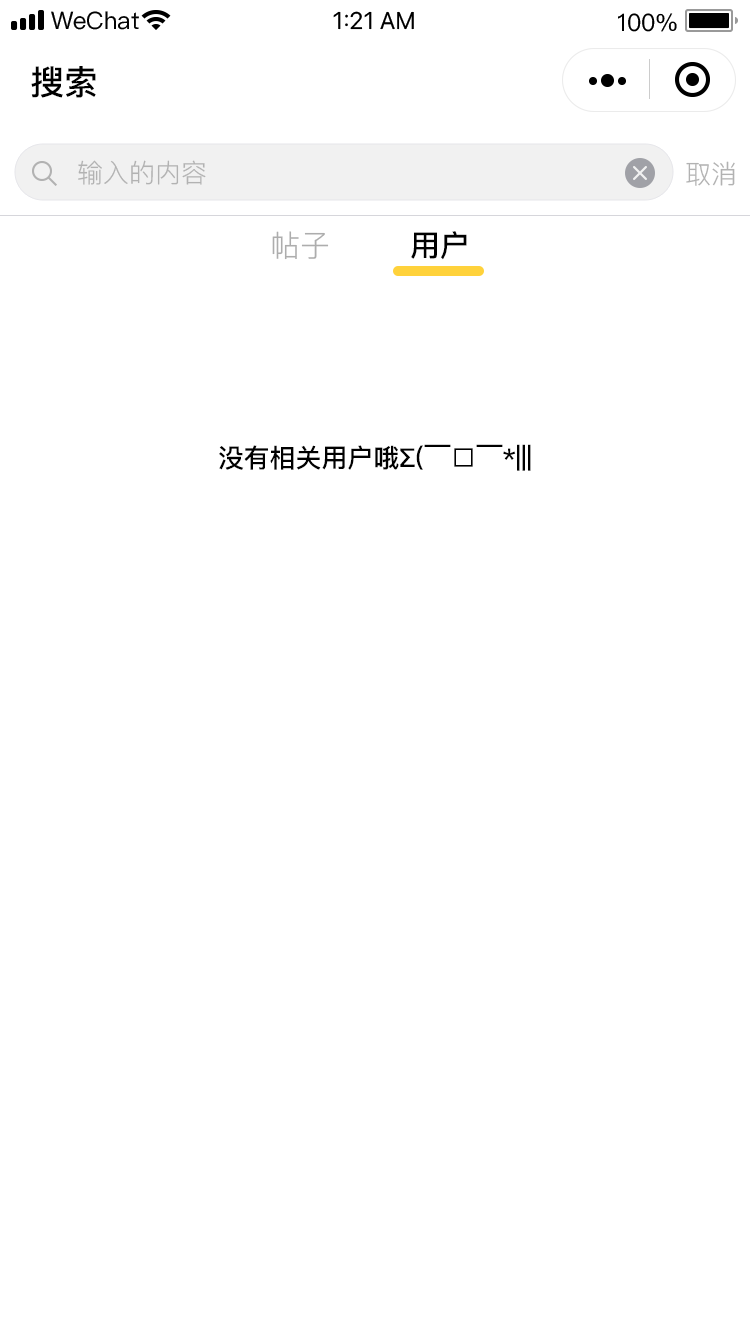
<style>
.page{position:relative;width:750px;height:1334px;background:#ffffff}
.page>*{position:absolute;margin:0}
.t1{font:34px "PingFang-SC-Bold";color:#000000}
.t2{font:26px "PingFangSC-Regular";color:#b2b2b2}
.t3{font:30px "PingFang-SC-Regular";color:#adadad}
.t4{font:30px "PingFang-SC-Bold";color:#000000}
.t5{font:26px "PingFang-SC-Bold";color:#000000}
</style>
<div class="page">
<p class="t1" style="left:31px;top:66px;width:65px;height:32px">搜索</p>
<p class="t2" style="left:78px;top:160px;width:128px;height:25px">输入的内容</p>
<p class="t2" style="left:686px;top:161px;width:49px;height:25px">取消</p>
<p class="t3" style="left:272px;top:231px;width:57px;height:29px">帖子</p>
<p class="t4" style="left:411px;top:231px;width:56px;height:29px">用户</p>
<p class="t5" style="left:219px;top:444px;width:312px;height:27px">没有相关用户哦∑(￣□￣*|||</p>
</div>
